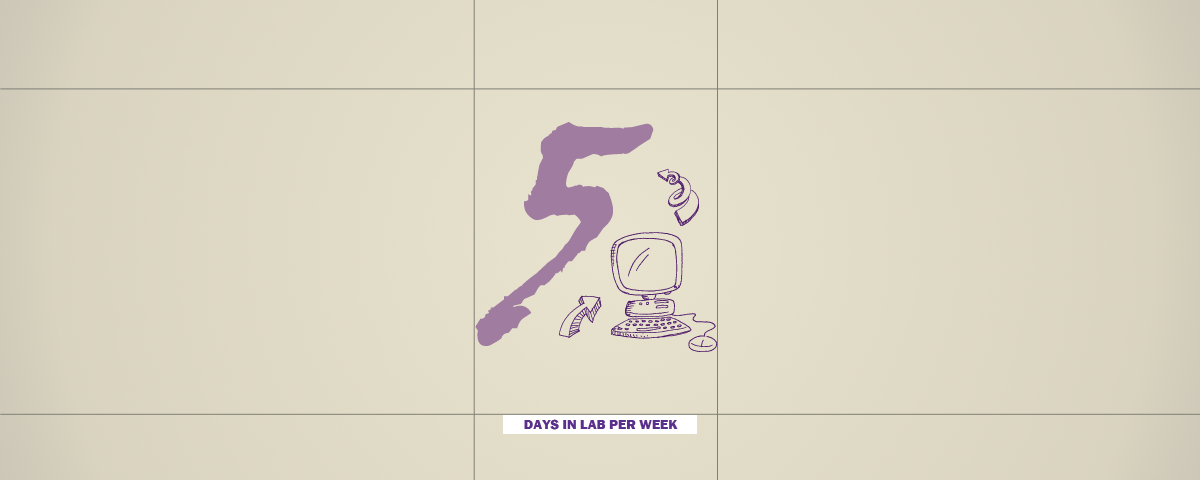
<style>
.page{position:relative;width:1200px;height:480px}
.page>*{position:absolute;margin:0}
.t1{font:300px "VinerHandITC";color:#a07ca0}
.t2{font:14px "FranklinGothic-Heavy";color:#5b308c}
</style>
<div class="page">
<p class="t1" style="left:475px;top:122px;width:179px;height:224px">5</p>
<p class="t2" style="left:524px;top:419px;width:154px;height:11px">DAYS IN LAB PER WEEK</p>
</div>
